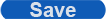
<style>
.page{position:relative;width:106px;height:19px;background:#0f5bb6}
.page>*{position:absolute;margin:0}
.t1{font:20px "Arial-BoldMT";color:#d9e1e9}
</style>
<div class="page">
<p class="t1" style="left:30px;top:2px;width:46px;height:15px">Save</p>
</div>
